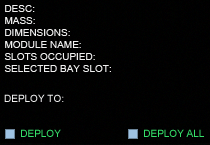
<style>
.page{position:relative;width:210px;height:145px}
.page>*{position:absolute;margin:0}
.t1{font:10px/12px "ArialMT";color:#eeeeee}
.t2{font:10px "ArialMT";color:#eeeeee}
.t3{font:10px "ArialMT";color:#35de69}
</style>
<div class="page">
<p class="t1" style="left:4px;top:5px;width:107px;height:67px">DESC:<br>MASS:<br>DIMENSIONS:<br>MODULE NAME:<br>SLOTS OCCUPIED:<br>SELECTED BAY SLOT:</p>
<p class="t2" style="left:4px;top:94px;width:60px;height:8px">DEPLOY TO:</p>
<p class="t3" style="left:21px;top:129px;width:40px;height:8px">DEPLOY</p>
<p class="t3" style="left:144px;top:129px;width:60px;height:8px">DEPLOY ALL</p>
</div>
